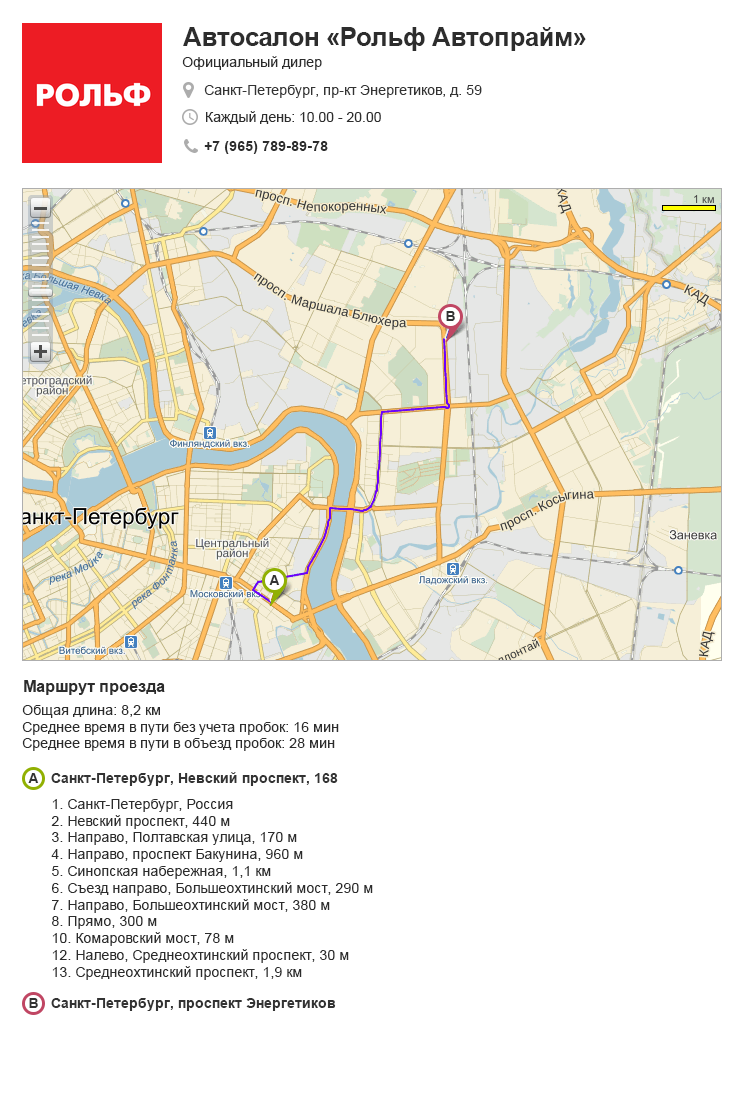
<style>
.page{position:relative;width:750px;height:1100px;background:#ffffff}
.page>*{position:absolute;margin:0}
.t1{font:26px "Arial-BoldMT";letter-spacing:-0.02em;color:#2d2d2d}
.t2{font:14px "ArialMT";color:#2c2c2c}
.t3{font:14px "ArialMT";color:#333333}
.t4{font:14px "ArialMT";color:#2d2d2d}
.t5{font:14px "Arial-BoldMT";color:#2c2c2c}
.t6{font:14px "Arial-BoldMT";color:#333333}
.t7{font:16px "Arial-BoldMT";color:#2c2c2c}
</style>
<div class="page">
<p class="t1" style="left:183px;top:27px;width:403px;height:24px">Автосалон «Рольф Автопрайм»</p>
<p class="t2" style="left:182px;top:56px;width:140px;height:14px">Официальный дилер</p>
<p class="t3" style="left:204px;top:85px;width:278px;height:13px">Санкт-Петербург, пр-кт Энергетиков, д. 59</p>
<p class="t4" style="left:206px;top:111px;width:175px;height:13px">Каждый день: 10.00 - 20.00</p>
<p class="t5" style="left:204px;top:141px;width:124px;height:13px">+7 (965) 789-89-78</p>
<p class="t6" style="left:446px;top:311px;width:9px;height:10px">B</p>
<p class="t6" style="left:269px;top:575px;width:11px;height:10px">А</p>
<p class="t7" style="left:24px;top:680px;width:141px;height:15px">Маршрут проезда</p>
<p class="t2" style="left:22px;top:705px;width:317px;height:46px">Общая длина: 8,2 км<br>Среднее время в пути без учета пробок: 16 мин<br>Среднее время в пути в объезд пробок: 28 мин</p>
<p class="t6" style="left:28px;top:773px;width:11px;height:10px">А</p>
<p class="t6" style="left:51px;top:772px;width:287px;height:14px">Санкт-Петербург, Невский проспект, 168</p>
<p class="t2" style="left:51px;top:799px;width:322px;height:181px">1. Санкт-Петербург, Россия<br>2. Невский проспект, 440 м<br>3. Направо, Полтавская улица, 170 м <br>4. Направо, проспект Бакунина, 960 м<br>5. Синопская набережная, 1,1 км<br>6. Съезд направо, Большеохтинский мост, 290 м<br>7. Направо, Большеохтинский мост, 380 м<br>8. Прямо, 300 м<br>10. Комаровский мост, 78 м<br>12. Налево, Среднеохтинский проспект, 30 м<br>13. Среднеохтинский проспект, 1,9 км</p>
<p class="t6" style="left:29px;top:998px;width:9px;height:10px">B</p>
<p class="t6" style="left:51px;top:998px;width:285px;height:13px">Санкт-Петербург, проспект Энергетиков</p>
</div>
